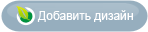
<style>
.page{position:relative;width:148px;height:32px;background:#96aebe}
.page>*{position:absolute;margin:0}
.t1{font:12px "ArialMT";color:#ffffff}
</style>
<div class="page">
<p class="t1" style="left:37px;top:10px;width:96px;height:12px">Добавить дизайн</p>
</div>
